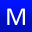
<style>
.page{position:relative;width:32px;height:32px;background:#010ebf}
.page>*{position:absolute;margin:0}
.t1{font:25.9px "Calibri";letter-spacing:-0.025em;color:#ffffff}
</style>
<div class="page">
<p class="t1" style="left:7px;top:8px;width:18px;height:17px">M</p>
</div>
